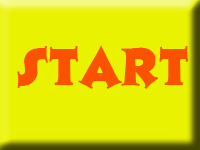
<style>
.page{position:relative;width:200px;height:150px;background:#e9f200}
.page>*{position:absolute;margin:0}
.t1{font:50px "Colbert";color:#fa5200}
</style>
<div class="page">
<p class="t1" style="left:17px;top:45px;width:172px;height:44px">START</p>
</div>
